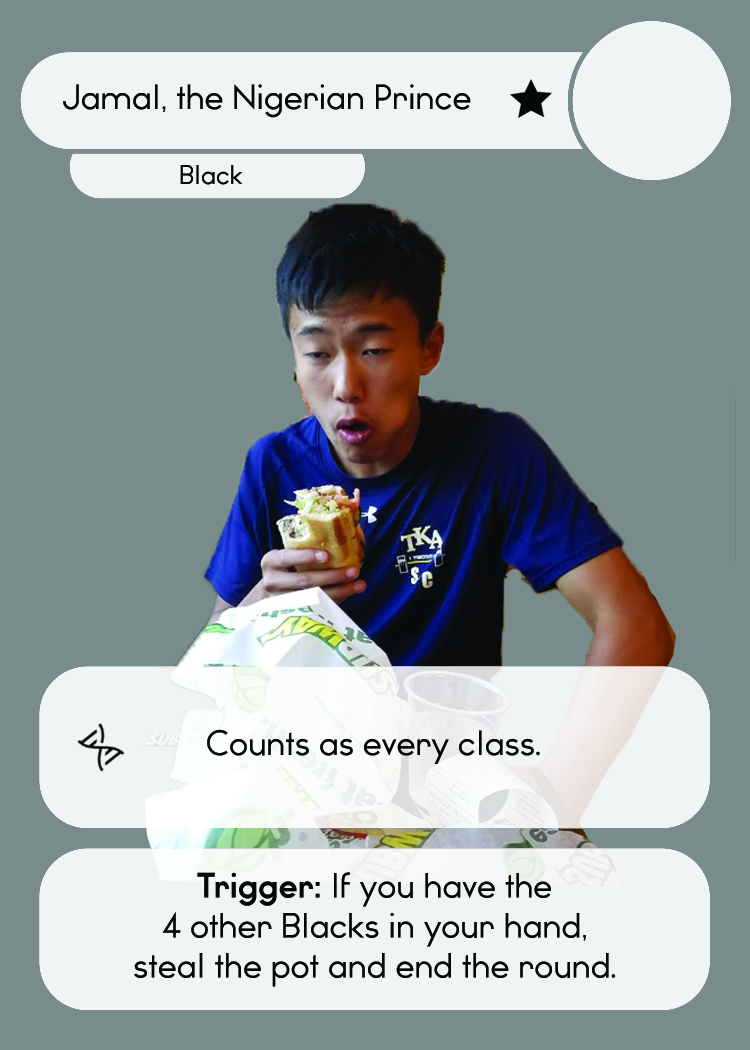
<style>
.page{position:relative;width:750px;height:1050px;background:#788c8c}
.page>*{position:absolute;margin:0}
.t1{font:33.3px "WatchwordRegularDemo";color:#060808}
.t2{font:25.5px "WatchwordRegularDemo";color:#060808}
.t3{font:33.3px "Dosis-Medium";color:#060808}
.t4{font:33.3px "WatchwordBoldDemo";color:#060808}
</style>
<div class="page">
<p class="t1" style="left:63px;top:84px;width:408px;height:34px">Jamal, the Nigerian Prince</p>
<p class="t2" style="left:180px;top:165px;width:63px;height:20px">Black</p>
<p class="t1" style="left:207px;top:729px;width:333px;height:35px">Counts as every class<span class="t3">.</span></p>
<p class="t1" style="left:134px;top:872px;width:482px;height:115px;text-align:center"><span class="t4">Trigger: </span>If you have the<br>4 other Blacks in your hand,<br>steal the pot and end the round<span class="t3">.</span></p>
</div>
